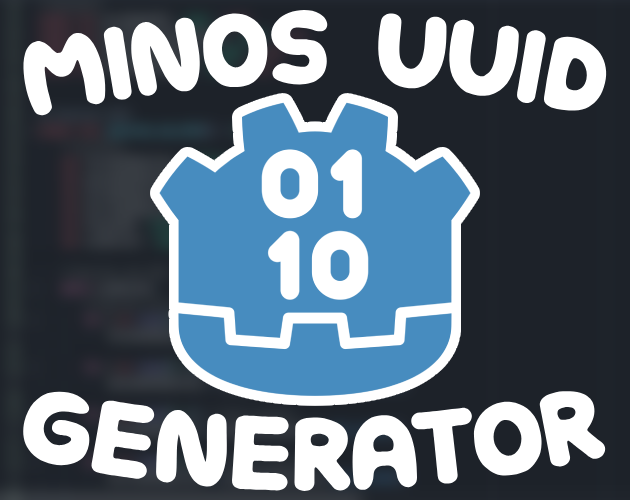
<style>
.page{position:relative;width:630px;height:500px;background:#ffffff}
.page>*{position:absolute;margin:0}
.t1{font:100.3px "HoneyblotCaps";color:#ffffff}
</style>
<div class="page">
<p class="t1" style="left:23px;top:9px;width:584px;height:107px">MINOs uuid</p>
<p class="t1" style="left:23px;top:391px;width:583px;height:100px">Generator</p>
</div>
